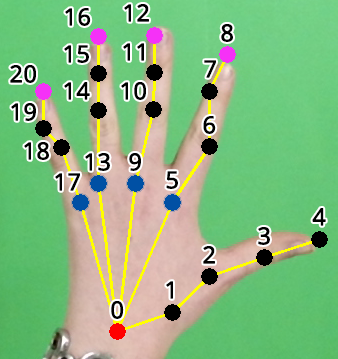
<style>
.page{position:relative;width:338px;height:359px}
.page>*{position:absolute;margin:0}
.t1{font:40px "OpenSans";color:#000000;font-weight:bold}
</style>
<div class="page">
<p class="t1" style="left:124px;top:4px;width:25px;height:18px">12</p>
<p class="t1" style="left:65px;top:8px;width:26px;height:18px">16</p>
<p class="t1" style="left:221px;top:24px;width:12px;height:18px">8</p>
<p class="t1" style="left:64px;top:45px;width:25px;height:18px">15</p>
<p class="t1" style="left:123px;top:43px;width:21px;height:18px">11</p>
<p class="t1" style="left:10px;top:65px;width:26px;height:18px">20</p>
<p class="t1" style="left:204px;top:60px;width:12px;height:18px">7</p>
<p class="t1" style="left:64px;top:82px;width:26px;height:18px">14</p>
<p class="t1" style="left:121px;top:82px;width:25px;height:18px">10</p>
<p class="t1" style="left:11px;top:103px;width:25px;height:18px">19</p>
<p class="t1" style="left:203px;top:116px;width:13px;height:18px">6</p>
<p class="t1" style="left:24px;top:142px;width:25px;height:18px">18</p>
<p class="t1" style="left:85px;top:153px;width:25px;height:18px">13</p>
<p class="t1" style="left:129px;top:153px;width:12px;height:18px">9</p>
<p class="t1" style="left:55px;top:173px;width:25px;height:18px">17</p>
<p class="t1" style="left:166px;top:171px;width:12px;height:18px">5</p>
<p class="t1" style="left:312px;top:208px;width:14px;height:18px">4</p>
<p class="t1" style="left:258px;top:227px;width:12px;height:18px">3</p>
<p class="t1" style="left:203px;top:246px;width:12px;height:18px">2</p>
<p class="t1" style="left:166px;top:281px;width:7px;height:18px">1</p>
<p class="t1" style="left:111px;top:301px;width:13px;height:18px">0</p>
</div>
